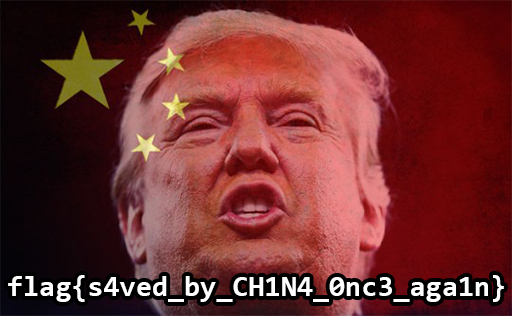
<style>
.page{position:relative;width:512px;height:316px}
.page>*{position:absolute;margin:0}
.t1{font:29.3px "Consolas-Bold";color:#ffffff}
</style>
<div class="page">
<p class="t1" style="left:8px;top:275px;width:496px;height:27px">flag{s4ved_by_CH1N4_0nc3_aga1n}</p>
</div>
